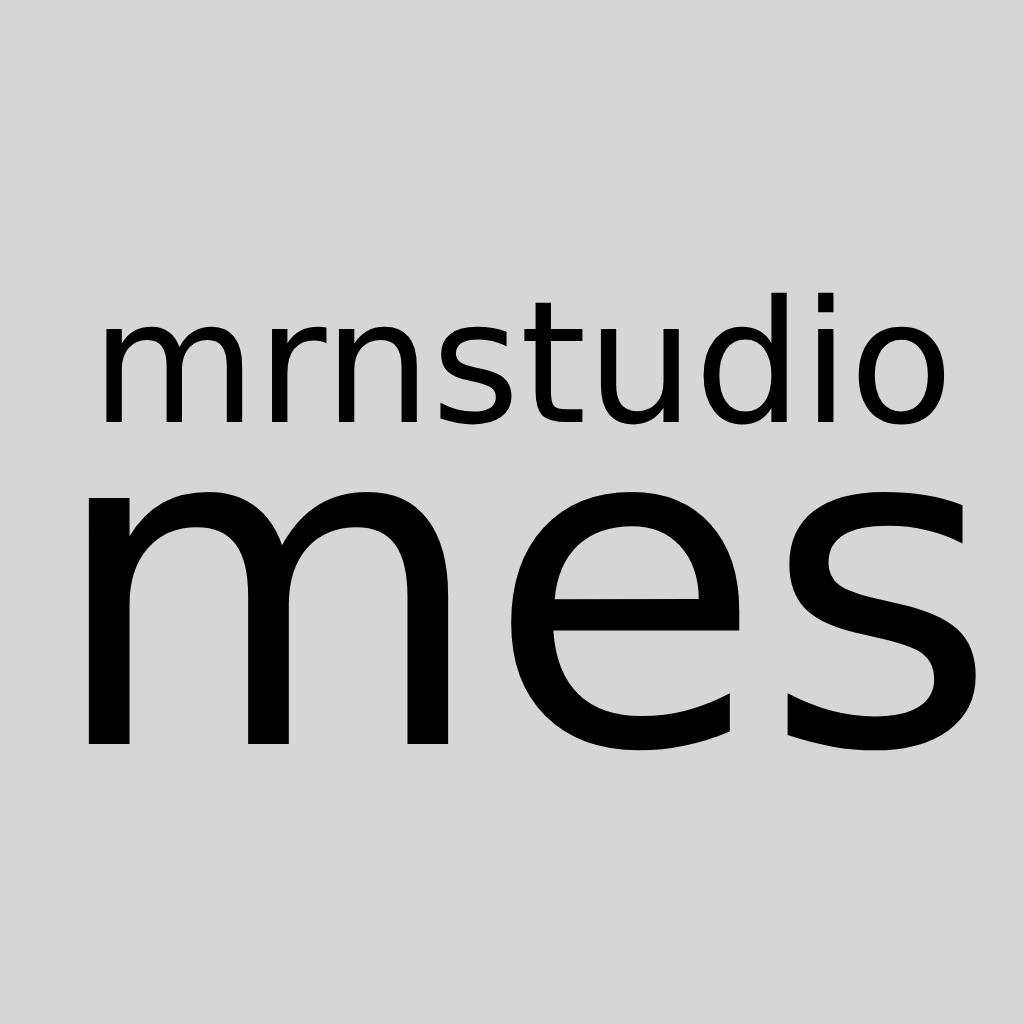
<style>
.page{position:relative;width:1024px;height:1024px;background:#d6d6d6}
.page>*{position:absolute;margin:0}
.t1{font:170px "DejaVuSans";color:#000000}
.t2{font:450px "DejaVuSans";color:#000000}
</style>
<div class="page">
<p class="t1" style="left:106px;top:292px;width:839px;height:133px">mrnstudio</p>
<p class="t2" style="left:88px;top:491px;width:888px;height:260px">mes</p>
</div>
